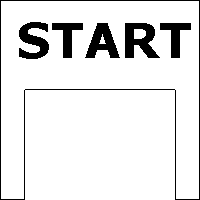
<style>
.page{position:relative;width:200px;height:200px;background:#ffffff}
.page>*{position:absolute;margin:0}
.t1{font:48px "Verdana-Bold";color:#000000}
</style>
<div class="page">
<p class="t1" style="left:19px;top:22px;width:172px;height:37px">START</p>
</div>
